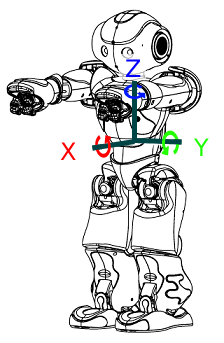
<style>
.page{position:relative;width:224px;height:343px;background:#ffffff}
.page>*{position:absolute;margin:0}
.t1{font:24px "DejaVuSans";color:#0000ff}
.t2{font:24px "DejaVuSans";color:#ff0000}
.t3{font:24px "DejaVuSans";color:#1dff00}
</style>
<div class="page">
<p class="t1" style="left:126px;top:59px;width:15px;height:18px">Z</p>
<p class="t2" style="left:60px;top:142px;width:16px;height:18px">X</p>
<p class="t3" style="left:193px;top:138px;width:16px;height:18px">Y</p>
</div>
